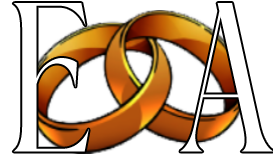
<style>
.page{position:relative;width:273px;height:154px;background:#ffffff}
.page>*{position:absolute;margin:0}
.t1{font:212px "FRISTARegular";letter-spacing:-0.01em;color:#ffffff}
</style>
<div class="page">
<p class="t1" style="left:13px;top:3px;width:76px;height:149px">E</p>
<p class="t1" style="left:180px;top:3px;width:94px;height:149px">A</p>
</div>
